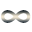
<style>
.page{position:relative;width:32px;height:32px;background:#ffffff}
.page>*{position:absolute;margin:0}
.t1{font:30.6px "KozGoPr6N-Bold"}
</style>
<div class="page">
<p class="t1" style="left:1px;top:10px;width:30px;height:13px">∞</p>
</div>
